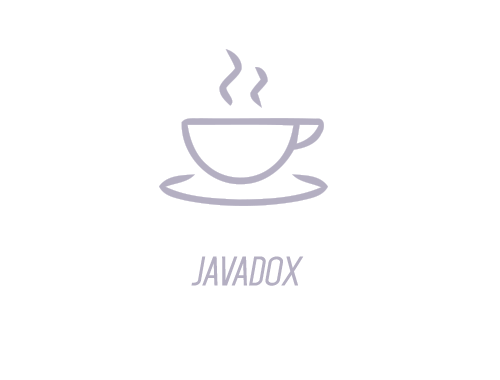
<style>
.page{position:relative;width:500px;height:380px;background:#ffffff}
.page>*{position:absolute;margin:0}
.t1{font:35.3px "Mohave-SemiBoldItalic";color:#b4afc2}
</style>
<div class="page">
<p class="t1" style="left:191px;top:256px;width:113px;height:30px">JAVADOX</p>
</div>
